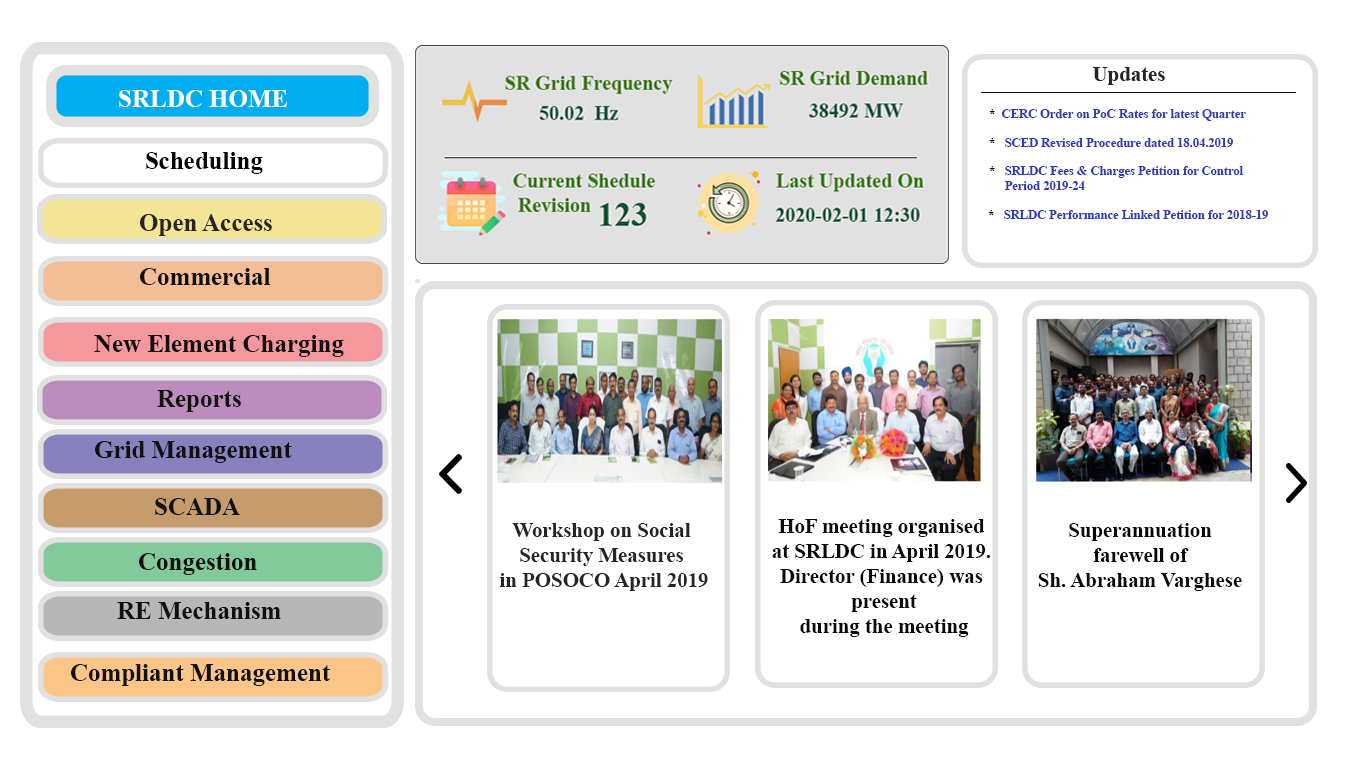
<style>
.page{position:relative;width:1360px;height:768px;background:#ffffff}
.page>*{position:absolute;margin:0}
.t1{font:24.9px "TimesNewRomanPS-BoldMT";color:#fdfdfd}
.t2{font:12.5px "TimesNewRomanPS-BoldMT";color:#2d3ab3}
.t3{font:12.5px "TimesNewRomanPS-BoldMT";color:#000000}
.t4{font:25px "TimesNewRomanPS-BoldMT";color:#040404}
.t5{font:25px "TimesNewRomanPS-BoldMT";color:#292424}
.t6{font:24.9px "TimesNewRomanPS-BoldMT";color:#111010}
.t7{font:25px "TimesNewRomanPS-BoldMT";color:#111010}
.t8{font:20.8px "TimesNewRomanPS-BoldMT";color:#0a0a0a}
.t9{font:20.8px "TimesNewRomanPS-BoldMT";color:#292424}
</style>
<div class="page">
<p class="t1" style="left:119px;top:90px;width:168px;height:17px">SRLDC HOME</p>
<p class="t2" style="left:989px;top:109px;width:257px;height:12px"><span class="t3">*  </span>CERC Order on PoC Rates for latest Quarter</p>
<p class="t2" style="left:989px;top:138px;width:245px;height:9px"><span class="t3">*  </span> SCED Revised Procedure dated 18.04.2019</p>
<p class="t4" style="left:146px;top:152px;width:117px;height:22px">Scheduling</p>
<p class="t2" style="left:989px;top:166px;width:255px;height:24px"><span class="t3">*  </span> SRLDC Fees &amp; Charges Petition for Control<br>     Period 2019-24</p>
<p class="t5" style="left:140px;top:214px;width:132px;height:22px">Open Access</p>
<p class="t2" style="left:988px;top:210px;width:281px;height:9px"><span class="t3">*  </span> SRLDC Performance Linked Petition for 2018-19</p>
<p class="t6" style="left:140px;top:268px;width:131px;height:17px">Commercial</p>
<p class="t6" style="left:94px;top:335px;width:250px;height:22px">New Element Charging</p>
<p class="t6" style="left:157px;top:390px;width:84px;height:22px">Reports</p>
<p class="t6" style="left:95px;top:441px;width:197px;height:22px">Grid Management</p>
<p class="t7" style="left:155px;top:498px;width:85px;height:17px">SCADA</p>
<p class="t8" style="left:772px;top:519px;width:218px;height:118px;text-align:center">HoF meeting organised <br>at SRLDC in April 2019. <br>Director (Finance) was <br>present<br>during the meeting</p>
<p class="t9" style="left:500px;top:523px;width:208px;height:68px;text-align:center">Workshop on Social <br>Security Measures <br>in POSOCO April 2019</p>
<p class="t8" style="left:1038px;top:523px;width:204px;height:68px;text-align:center">Superannuation<br> farewell of <br>Sh. Abraham Varghese</p>
<p class="t7" style="left:139px;top:553px;width:118px;height:22px">Congestion</p>
<p class="t7" style="left:117px;top:602px;width:164px;height:17px">RE Mechanism</p>
<p class="t7" style="left:71px;top:664px;width:259px;height:22px">Compliant Management</p>
</div>
